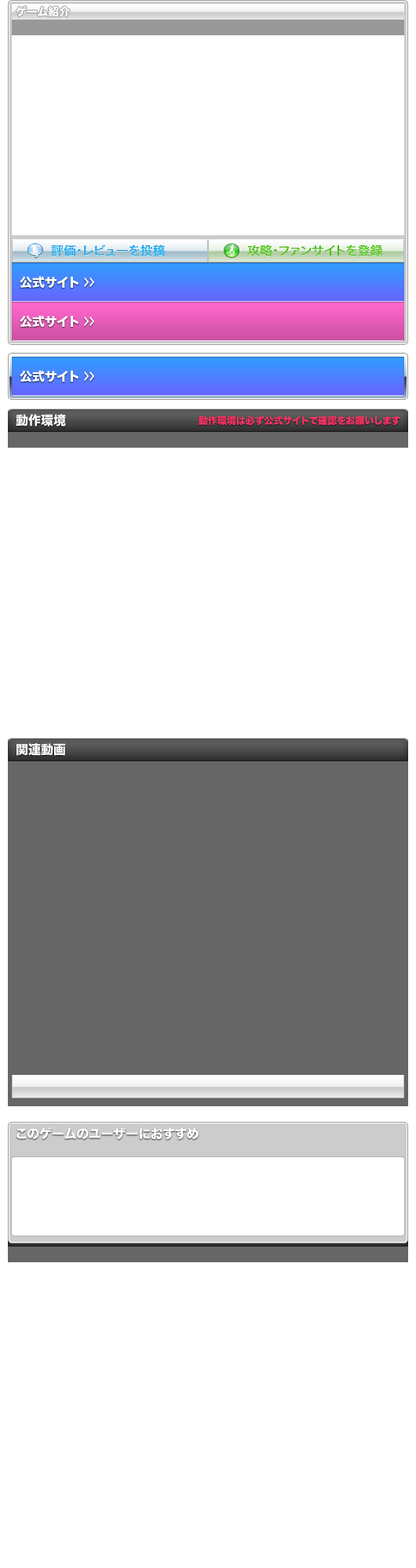
<style>
.page{position:relative;width:416px;height:1568px;background:#ffffff}
.page>*{position:absolute;margin:0}
.t1{font:11px "HiraKakuStd-W8";color:#ffffff}
.t2{font:12.5px "HiraKakuPro-W6"}
.t3{font:12.5px "HiraKakuStd-W8";color:#fffefe}
.t4{font:12.5px "HiraKakuStd-W8";color:#fffefe;scale:0.5 1}
.t5{font:12.5px "HiraKakuStd-W8";color:#ffffff}
.t6{font:9.4px "HiraKakuStd-W8";color:#ff3366}
</style>
<div class="page">
<p class="t1" style="left:16px;top:5px;width:55px;height:12px">ゲーム紹介</p>
<p class="t2" style="left:51px;top:245px;width:114px;height:12px">評価・レビューを投稿</p>
<p class="t2" style="left:51px;top:245px;width:114px;height:12px">評価・レビューを投稿</p>
<p class="t2" style="left:247px;top:245px;width:136px;height:12px">攻略・ファンサイトを登録</p>
<p class="t2" style="left:247px;top:245px;width:136px;height:12px">攻略・ファンサイトを登録</p>
<p class="t3" style="left:20px;top:276px;width:75px;height:13px">公式サイト <span class="t4">＞＞</span></p>
<p class="t3" style="left:20px;top:315px;width:75px;height:13px">公式サイト <span class="t4">＞＞</span></p>
<p class="t3" style="left:20px;top:370px;width:75px;height:13px">公式サイト <span class="t4">＞＞</span></p>
<p class="t5" style="left:16px;top:414px;width:50px;height:12px">動作環境</p>
<p class="t6" style="left:198px;top:416px;width:202px;height:10px">動作環境は必ず公式サイトで確認をお願いします</p>
<p class="t5" style="left:16px;top:743px;width:50px;height:13px">関連動画</p>
<p class="t5" style="left:16px;top:1127px;width:182px;height:13px">このゲームのユーザーにおすすめ</p>
</div>
